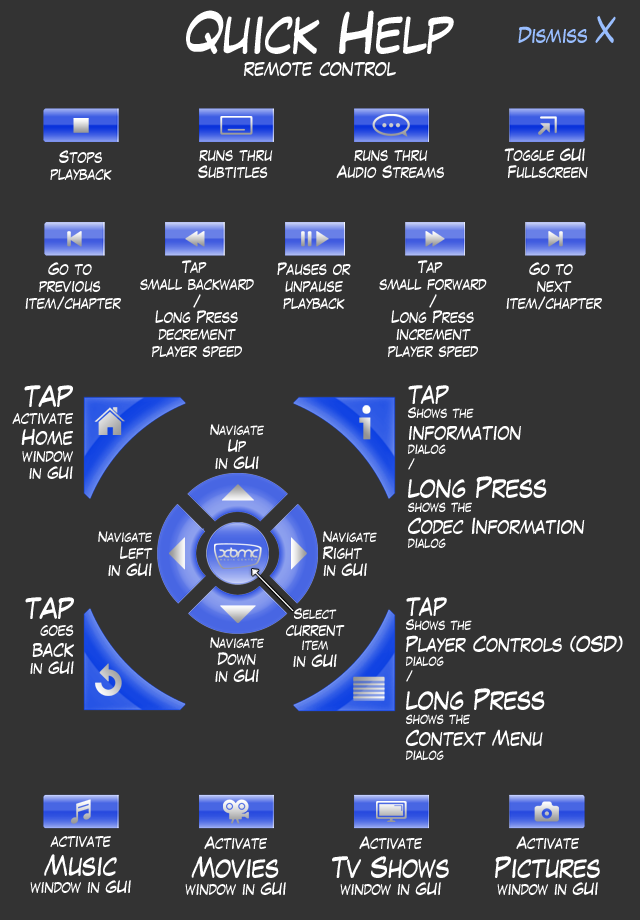
<style>
.page{position:relative;width:640px;height:920px;background:#333333}
.page>*{position:absolute;margin:0}
.t1{font:18px "LaffayetteComicPro";color:#ffffff}
.t2{font:48px "LaffayetteComicPro";color:#ffffff}
.t3{font:18px "LaffayetteComicPro";color:#99beff}
.t4{font:30px "LaffayetteComicPro";color:#99beff}
.t5{font:14px "LaffayetteComicPro";color:#ffffff}
.t6{font:24px "LaffayetteComicPro";color:#ffffff}
.t7{font:12px "LaffayetteComicPro";color:#ffffff}
</style>
<div class="page">
<p class="t1" style="left:186px;top:10px;width:268px;height:66px;text-align:center"><span class="t2">Quick Help<br></span>remote control</p>
<p class="t3" style="left:518px;top:15px;width:98px;height:28px">Dismiss <span class="t4">X</span></p>
<p class="t5" style="left:50px;top:150px;width:62px;height:30px;text-align:center">Stops<br>playback</p>
<p class="t5" style="left:198px;top:150px;width:75px;height:28px;text-align:center">runs thru<br>Subtitles</p>
<p class="t5" style="left:336px;top:150px;width:108px;height:28px;text-align:center">runs thru<br>Audio Streams</p>
<p class="t5" style="left:504px;top:148px;width:84px;height:30px;text-align:center">Toggle GUI <br>Fullscreen</p>
<p class="t5" style="left:25px;top:262px;width:96px;height:48px;text-align:center">Go to <br>previous <br>item/chapter</p>
<p class="t5" style="left:140px;top:260px;width:114px;height:97px;text-align:center">Tap <br>small backward<br>/<br>Long Press<br>decrement<br>player speed</p>
<p class="t5" style="left:277px;top:262px;width:74px;height:47px;text-align:center">Pauses or<br>unpause<br>playback</p>
<p class="t5" style="left:379px;top:260px;width:108px;height:97px;text-align:center">Tap <br>small forward<br>/<br>Long Press<br>increment<br>player speed</p>
<p class="t5" style="left:506px;top:262px;width:96px;height:48px;text-align:center">Go to <br>next<br>item/chapter</p>
<p class="t5" style="left:12px;top:385px;width:61px;height:94px;text-align:right"><span class="t6">TAP<br></span>activate<br><span class="t1">Home<br></span>window<br>in GUI</p>
<p class="t1" style="left:408px;top:385px;width:177px;height:163px"><span class="t6">tap</span><span class="t7"> <br>Shows the <br></span>information <br><span class="t7">dialog<br>/<br></span><span class="t6">long Press<br></span><span class="t7">shows the<br></span>Codec Information<br><span class="t7">dialog</span></p>
<p class="t5" style="left:210px;top:424px;width:54px;height:45px;text-align:center"><span class="t7">Navigate<br></span>Up<br>in GUI</p>
<p class="t5" style="left:98px;top:531px;width:55px;height:45px;text-align:right"><span class="t7">Navigate<br></span>Left<br>in GUI</p>
<p class="t5" style="left:323px;top:531px;width:54px;height:45px"><span class="t7">Navigate<br></span>Right<br>in GUI</p>
<p class="t5" style="left:25px;top:597px;width:49px;height:77px;text-align:right"><span class="t6">TAP<br></span>goes<br><span class="t1">back<br></span>in GUI</p>
<p class="t1" style="left:406px;top:597px;width:217px;height:163px"><span class="t6">tap</span><span class="t7"><br>Shows the <br></span>Player Controls (OSD)<br><span class="t7">dialog<br>/<br></span><span class="t6">long Press<br></span><span class="t7">shows the<br></span>Context Menu<br><span class="t7">dialog</span></p>
<p class="t5" style="left:286px;top:608px;width:59px;height:59px;text-align:center"><span class="t7">Select<br></span>current<br><span class="t7">item<br></span>in GUI</p>
<p class="t5" style="left:210px;top:637px;width:54px;height:45px;text-align:center"><span class="t7">Navigate<br></span>Down<br>in GUI</p>
<p class="t5" style="left:30px;top:836px;width:101px;height:57px;text-align:center">activate<br><span class="t6">Music<br></span>window in GUI</p>
<p class="t5" style="left:185px;top:836px;width:101px;height:59px;text-align:center">Activate<br><span class="t6">Movies<br></span>window in GUI</p>
<p class="t5" style="left:332px;top:836px;width:117px;height:59px;text-align:center">Activate<br><span class="t6">Tv Shows<br></span>window in GUI</p>
<p class="t5" style="left:495px;top:836px;width:105px;height:59px;text-align:center">Activate<br><span class="t6">Pictures<br></span>window in GUI</p>
</div>
